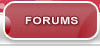
<style>
.page{position:relative;width:100px;height:48px}
.page>*{position:absolute;margin:0}
.t1{font:10.3px "Arial-BoldMT";letter-spacing:0.025em;color:#ffffff;scale:1.16 1}
</style>
<div class="page">
<p class="t1" style="left:25px;top:16px;width:53px;height:9px">FORUMS</p>
</div>
